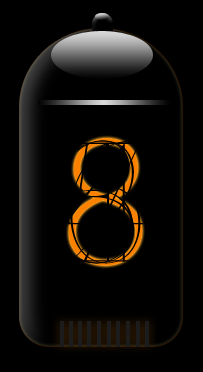
<style>
.page{position:relative;width:203px;height:372px;background:#000000}
.page>*{position:absolute;margin:0}
.t1{font:165px "KozGoPro-ExtraLight"}
</style>
<div class="page">
<p class="t1" style="left:69px;top:138px;width:73px;height:128px">8</p>
</div>
